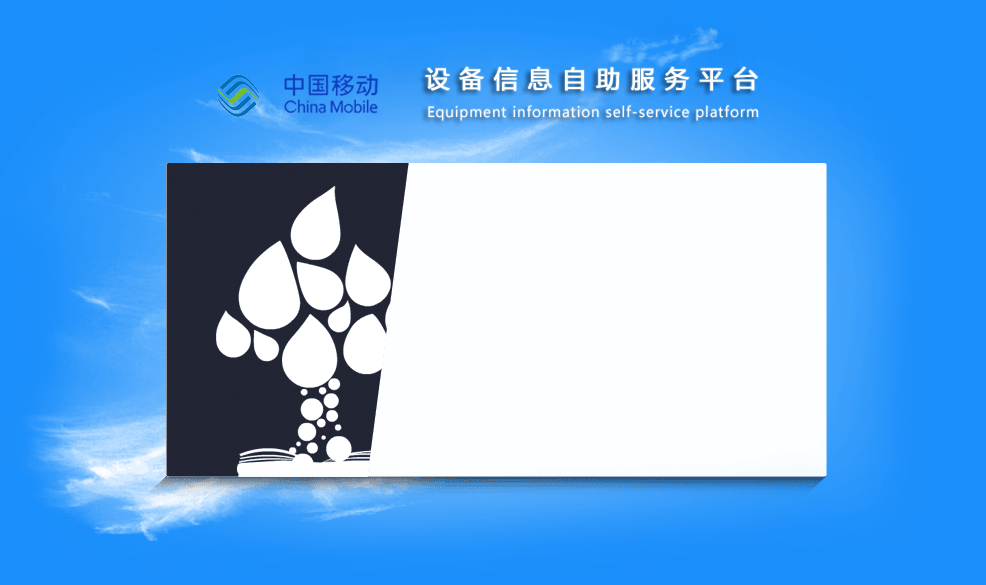
<style>
.page{position:relative;width:986px;height:585px;background:#fdfeff}
.page>*{position:absolute;margin:0}
.t1{font:24px "MicrosoftYaHei";letter-spacing:0.4em;color:#ffffff;font-weight:bold}
.t2{font:14px "MicrosoftYaHei";letter-spacing:0.06em;color:#ffffff}
</style>
<div class="page">
<p class="t1" style="left:425px;top:66px;width:333px;height:25px">设备信息自助服务平台</p>
<p class="t2" style="left:428px;top:105px;width:330px;height:16px">Equipment information self-service platform</p>
</div>
